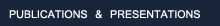
<style>
.page{position:relative;width:220px;height:26px;background:#19253a}
.page>*{position:absolute;margin:0}
.t1{font:17px "Kartika";color:#ffffff}
</style>
<div class="page">
<p class="t1" style="left:9px;top:10px;width:191px;height:9px">PUBLICATIONS &amp; PRESENTATIONS</p>
</div>
